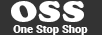
<style>
.page{position:relative;width:102px;height:35px;background:#333333}
.page>*{position:absolute;margin:0}
.t1{font:29.2px "CooperBlackStd";letter-spacing:0.025em;color:#ffffff;scale:1.14 1}
.t2{font:10.6px "Roboto-Black";letter-spacing:0.025em;color:#ffffff}
</style>
<div class="page">
<p class="t1" style="left:11px;top:1px;width:73px;height:21px">OSS</p>
<p class="t2" style="left:13px;top:25px;width:75px;height:10px">One Stop Shop</p>
</div>
